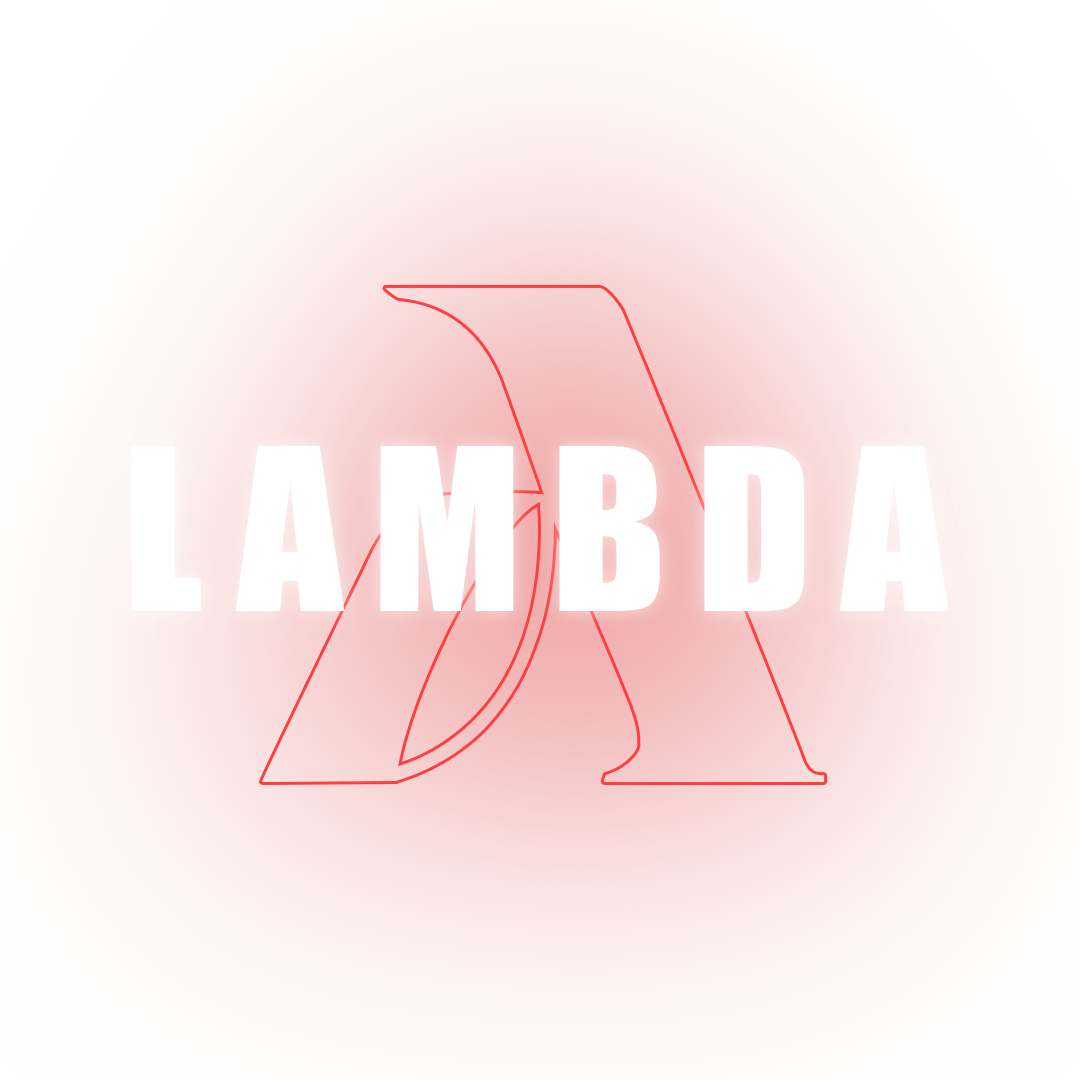
<style>
.page{position:relative;width:1080px;height:1080px}
.page>*{position:absolute;margin:0}
.t1{font:209px "Impact";letter-spacing:0.14em;color:#ffffff}
</style>
<div class="page">
<p class="t1" style="left:131px;top:445px;width:818px;height:166px">LAMBDA</p>
</div>
